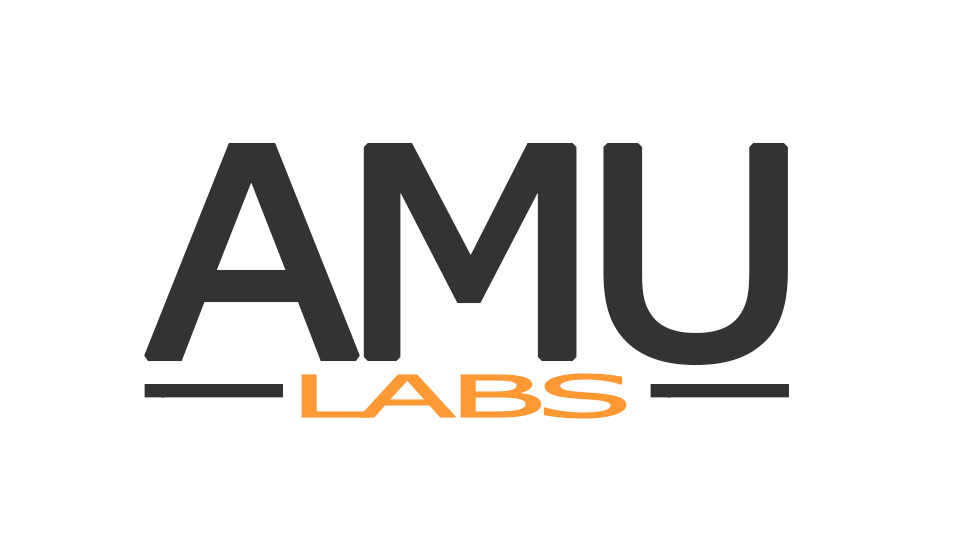
<style>
.page{position:relative;width:960px;height:540px;background:#ffffff}
.page>*{position:absolute;margin:0}
.t1{font:288.8px "Verdana";letter-spacing:-0.1em;color:#333333;font-weight:bold;scale:1.09 1}
.t2{font:58.3px "Verdana";letter-spacing:-0.1em;color:#ff9933;font-weight:bold;scale:2.49 1}
.t3{font:204.8px "Verdana";letter-spacing:-0.1em;color:#333333;font-weight:bold;scale:0.15 1}
</style>
<div class="page">
<p class="t1" style="left:144px;top:142px;width:644px;height:224px">AMU</p>
<p class="t2" style="left:301px;top:373px;width:326px;height:46px">LABS</p>
<p class="t3" style="left:144px;top:384px;width:139px;height:14px">________</p>
<p class="t3" style="left:650px;top:384px;width:139px;height:14px">________</p>
</div>
